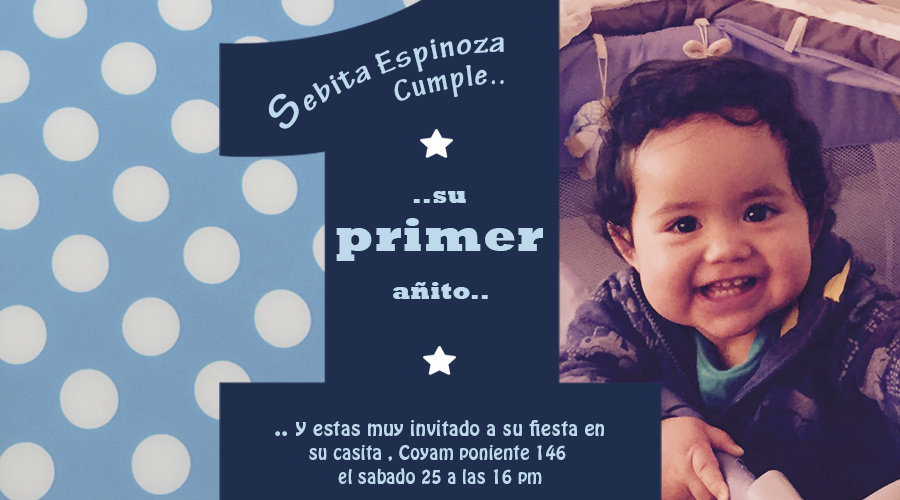
<style>
.page{position:relative;width:900px;height:500px;background:#202e4e}
.page>*{position:absolute;margin:0}
.t1{font:32px/32px "TektonPro-BoldCond";letter-spacing:0.025em;color:#bed9ec}
.t2{font:48px/32px "TektonPro-BoldCond";letter-spacing:0.025em;color:#bed9ec}
.t3{font:24px/48px "Rockwell-ExtraBold";letter-spacing:0.025em;color:#bed9ec}
.t4{font:48px/48px "Rockwell-ExtraBold";letter-spacing:0.025em;color:#bed9ec}
.t5{font:17.3px/24px "HoboStd";letter-spacing:0.025em;color:#bed9ec}
.t6{font:21.3px/24px "HoboStd";letter-spacing:0.025em;color:#bed9ec}
.t7{font:18.7px/24px "HoboStd";letter-spacing:0.025em;color:#bed9ec}
</style>
<div class="page">
<p class="t1" style="left:268px;top:37px;width:236px;height:92px;text-align:right;rotate:-20deg"><span class="t2">S</span>ebita Espinoza<br>Cumple..</p>
<p class="t3" style="left:336px;top:191px;width:207px;height:108px;text-align:center">..su<br><span class="t4">primer<br></span>añito..</p>
<p class="t5" style="left:275px;top:420px;width:329px;height:64px;text-align:center"><span class="t6">.. y </span><span class="t7">estas muy invitado a su fiesta en<br></span>su casita , Coyam poniente 146 <br>el sabado 25 a las 16 pm</p>
</div>
